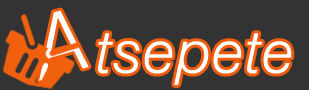
<style>
.page{position:relative;width:309px;height:90px;background:#333333}
.page>*{position:absolute;margin:0}
.t1{font:85.5px "Swiss721LightItalicBT";color:#ffffff;font-weight:bold}
.t2{font:59.1px "Swiss721LightItalicBT";color:#ffffff;font-weight:bold}
</style>
<div class="page">
<p class="t1" style="left:39px;top:10px;width:50px;height:71px;rotate:-16deg">A</p>
<p class="t2" style="left:98px;top:33px;width:194px;height:52px">tsepete</p>
</div>
